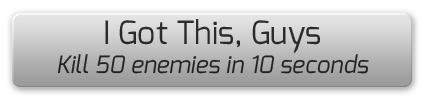
<style>
.page{position:relative;width:425px;height:100px}
.page>*{position:absolute;margin:0}
.t1{font:24px "Exo-Italic";color:#282828}
.t2{font:32px "Exo-Regular";color:#282828}
</style>
<div class="page">
<p class="t1" style="left:57px;top:19px;width:312px;height:55px;text-align:center"><span class="t2">I Got This, Guys<br></span>Kill 50 enemies in 10 seconds</p>
</div>
